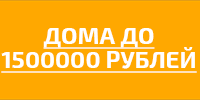
<style>
.page{position:relative;width:200px;height:100px;background:#ffa800}
.page>*{position:absolute;margin:0}
.t1{font:24px/24px "Exo2-Bold";color:#ffffff;text-decoration:underline}
</style>
<div class="page">
<p class="t1" style="left:1px;top:28px;width:196px;height:45px;text-align:center">ДОМА ДО<br>1500000 РУБЛЕЙ</p>
</div>
